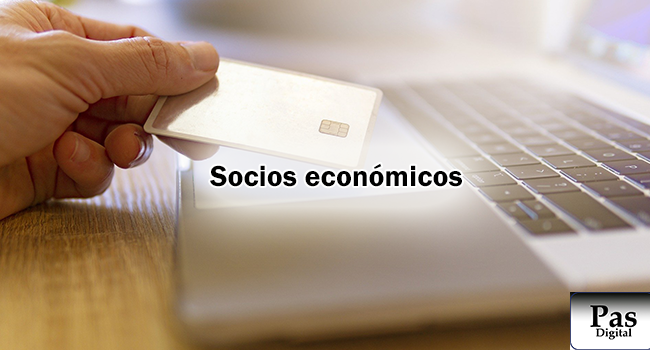
<style>
.page{position:relative;width:650px;height:350px}
.page>*{position:absolute;margin:0}
.t1{font:30px "FranklinGothic-Demi";color:#000000}
</style>
<div class="page">
<p class="t1" style="left:210px;top:163px;width:252px;height:24px">Socios económicos</p>
</div>
